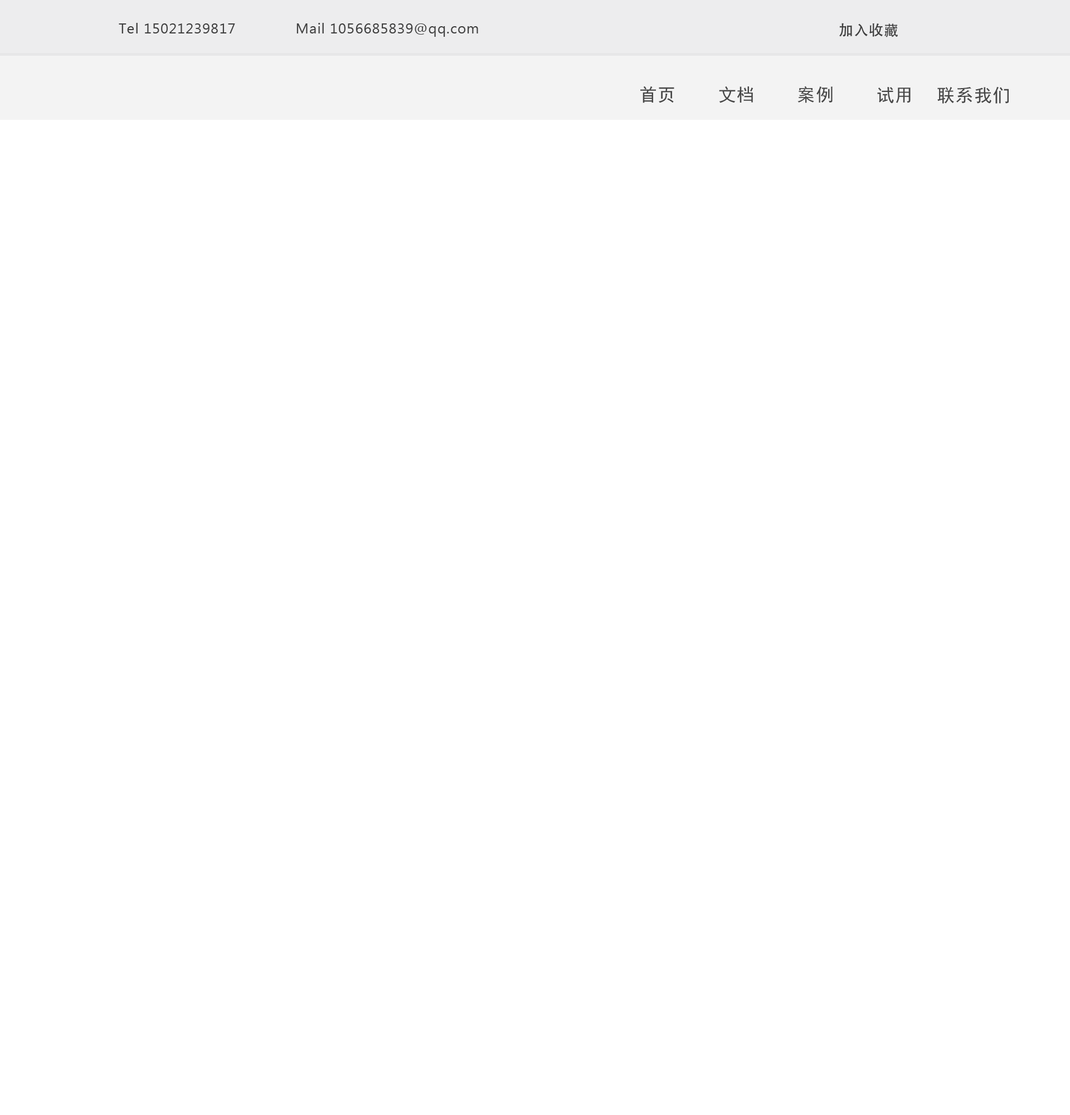
<style>
.page{position:relative;width:1070px;height:1115px;background:#ffffff}
.page>*{position:absolute;margin:0}
.t1{font:14.5px "MicrosoftNewTaiLue";letter-spacing:0.04em;color:#3f3f3f}
.t2{font:14.5px "AdobeHeitiStd-Regular";letter-spacing:0.04em;color:#3f3f3f}
.t3{font:17.8px "SimHei";letter-spacing:0.04em;color:#474747}
</style>
<div class="page">
<p class="t1" style="left:119px;top:23px;width:116px;height:10px">Tel 15021239817</p>
<p class="t1" style="left:296px;top:23px;width:182px;height:14px">Mail 1056685839@qq.com</p>
<p class="t2" style="left:839px;top:23px;width:59px;height:14px">加入收藏</p>
<p class="t3" style="left:640px;top:86px;width:34px;height:17px">首页</p>
<p class="t3" style="left:719px;top:86px;width:34px;height:17px">文档</p>
<p class="t3" style="left:797px;top:86px;width:36px;height:17px">案例</p>
<p class="t3" style="left:877px;top:87px;width:34px;height:16px">试用</p>
<p class="t3" style="left:937px;top:86px;width:72px;height:18px">联系我们</p>
</div>
